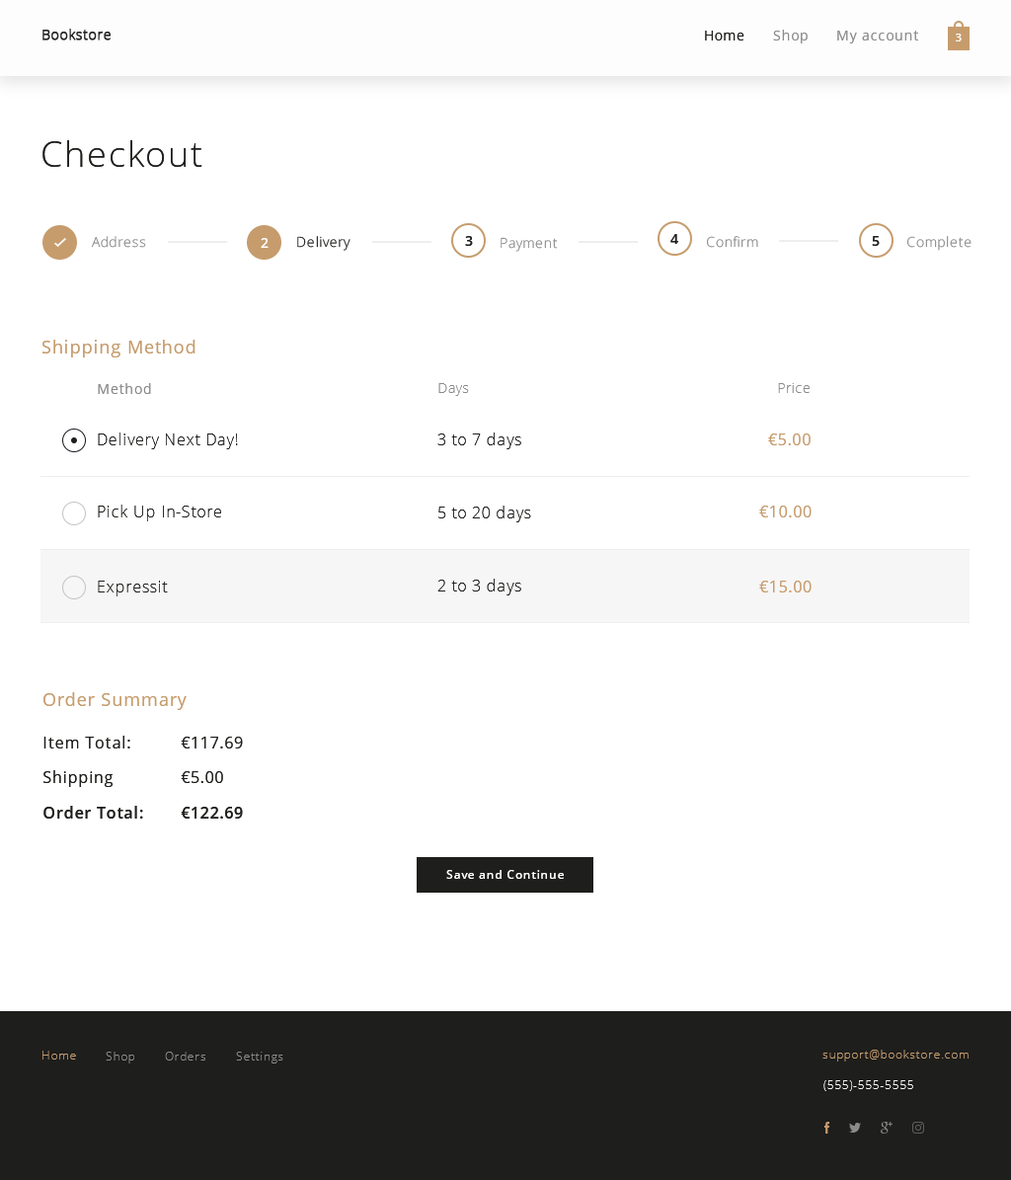
<style>
.page{position:relative;width:1011px;height:1180px;background:#ffffff}
.page>*{position:absolute;margin:0}
.t1{font:35.5px "OpenSans-Light";letter-spacing:0.05em;color:#1e1e1c}
.t2{font:13.8px "OpenSans-Semibold";letter-spacing:0.05em;color:#1e1e1c}
.t3{font:13.8px "OpenSans-Light";letter-spacing:0.05em;color:#8c8c8c}
.t4{font:13.8px "OpenSans-Semibold";letter-spacing:0.05em;color:#fefefd}
.t5{font:13.8px "OpenSans-Light";letter-spacing:0.05em}
.t6{font:17.8px "OpenSans";letter-spacing:0.05em;color:#c69c6d}
.t7{font:13.8px "OpenSans";letter-spacing:0.05em;color:#8c8c8c}
.t8{font:15.8px "OpenSans-Light";letter-spacing:0.05em;color:#1e1e1c}
.t9{font:15.8px "OpenSans";letter-spacing:0.05em;color:#c69c6d}
.t10{font:15.8px "OpenSans";letter-spacing:0.05em;color:#1e1e1c}
.t11{font:15.8px "OpenSans-Semibold";letter-spacing:0.05em;color:#1e1e1c}
.t12{font:11.8px "OpenSans-Semibold";letter-spacing:0.05em;color:#fffefe}
</style>
<div class="page">
<p class="t1" style="left:42px;top:140px;width:160px;height:27px">Checkout</p>
<p class="t2" style="left:670px;top:234px;width:8px;height:10px">4</p>
<p class="t3" style="left:92px;top:236px;width:54px;height:12px">Address</p>
<p class="t4" style="left:261px;top:238px;width:8px;height:10px">2</p>
<p class="t5" style="left:297px;top:236px;width:53px;height:15px">Delivery</p>
<p class="t2" style="left:465px;top:236px;width:8px;height:10px">3</p>
<p class="t3" style="left:500px;top:237px;width:58px;height:15px">Payment</p>
<p class="t3" style="left:707px;top:236px;width:51px;height:12px">Confirm</p>
<p class="t2" style="left:872px;top:236px;width:8px;height:10px">5</p>
<p class="t3" style="left:907px;top:236px;width:64px;height:15px">Complete</p>
<p class="t6" style="left:42px;top:340px;width:153px;height:17px">Shipping Method</p>
<p class="t7" style="left:98px;top:383px;width:53px;height:11px">Method</p>
<p class="t3" style="left:438px;top:383px;width:31px;height:13px">Days</p>
<p class="t3" style="left:778px;top:383px;width:31px;height:10px">Price</p>
<p class="t8" style="left:98px;top:432px;width:140px;height:17px">Delivery Next Day!</p>
<p class="t8" style="left:437px;top:432px;width:84px;height:17px">3 to 7 days</p>
<p class="t9" style="left:768px;top:433px;width:42px;height:12px">€5.00</p>
<p class="t8" style="left:98px;top:504px;width:123px;height:17px">Pick Up In-Store</p>
<p class="t8" style="left:438px;top:505px;width:93px;height:17px">5 to 20 days</p>
<p class="t9" style="left:759px;top:505px;width:52px;height:12px">€10.00</p>
<p class="t8" style="left:98px;top:580px;width:70px;height:16px">Expressit</p>
<p class="t8" style="left:437px;top:578px;width:84px;height:17px">2 to 3 days</p>
<p class="t9" style="left:759px;top:580px;width:52px;height:12px">€15.00</p>
<p class="t6" style="left:43px;top:692px;width:144px;height:18px">Order Summary</p>
<p class="t10" style="left:43px;top:735px;width:87px;height:13px">Item Total:</p>
<p class="t10" style="left:181px;top:736px;width:62px;height:12px">€117.69</p>
<p class="t10" style="left:43px;top:770px;width:70px;height:17px">Shipping</p>
<p class="t10" style="left:181px;top:771px;width:42px;height:12px">€5.00</p>
<p class="t11" style="left:43px;top:806px;width:100px;height:12px">Order Total:</p>
<p class="t11" style="left:181px;top:807px;width:62px;height:11px">€122.69</p>
<p class="t12" style="left:446px;top:870px;width:118px;height:9px">Save and Continue</p>
</div>
